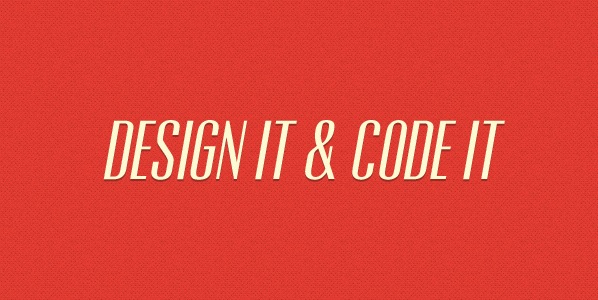
<style>
.page{position:relative;width:598px;height:300px}
.page>*{position:absolute;margin:0}
.t1{font:78px "Untitled";color:#fcfad3;font-style:italic}
</style>
<div class="page">
<p class="t1" style="left:103px;top:120px;width:402px;height:60px">Design it &amp; Code it</p>
</div>
